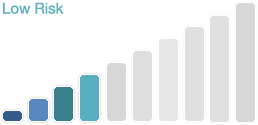
<style>
.page{position:relative;width:258px;height:125px;background:#ffffff}
.page>*{position:absolute;margin:0}
.t1{font:15px "HelveticaNeue";color:#58b0be}
</style>
<div class="page">
<p class="t1" style="left:3px;top:2px;width:61px;height:12px">Low Risk</p>
</div>
